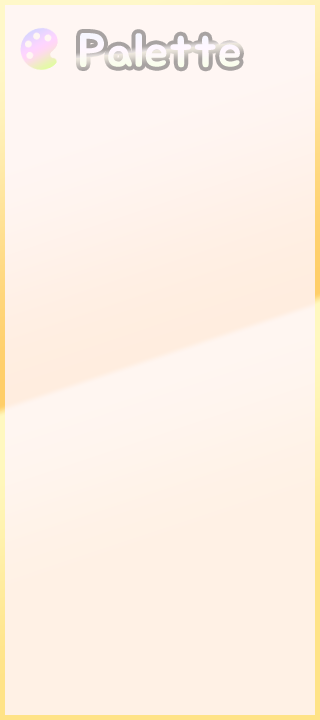
<style>
.page{position:relative;width:320px;height:720px;background:#fff1e5}
.page>*{position:absolute;margin:0}
.t1{font:48px "Jua-Regular";color:#fdf7fd}
</style>
<div class="page">
<p class="t1" style="left:80px;top:33px;width:160px;height:35px">Palette</p>
</div>
